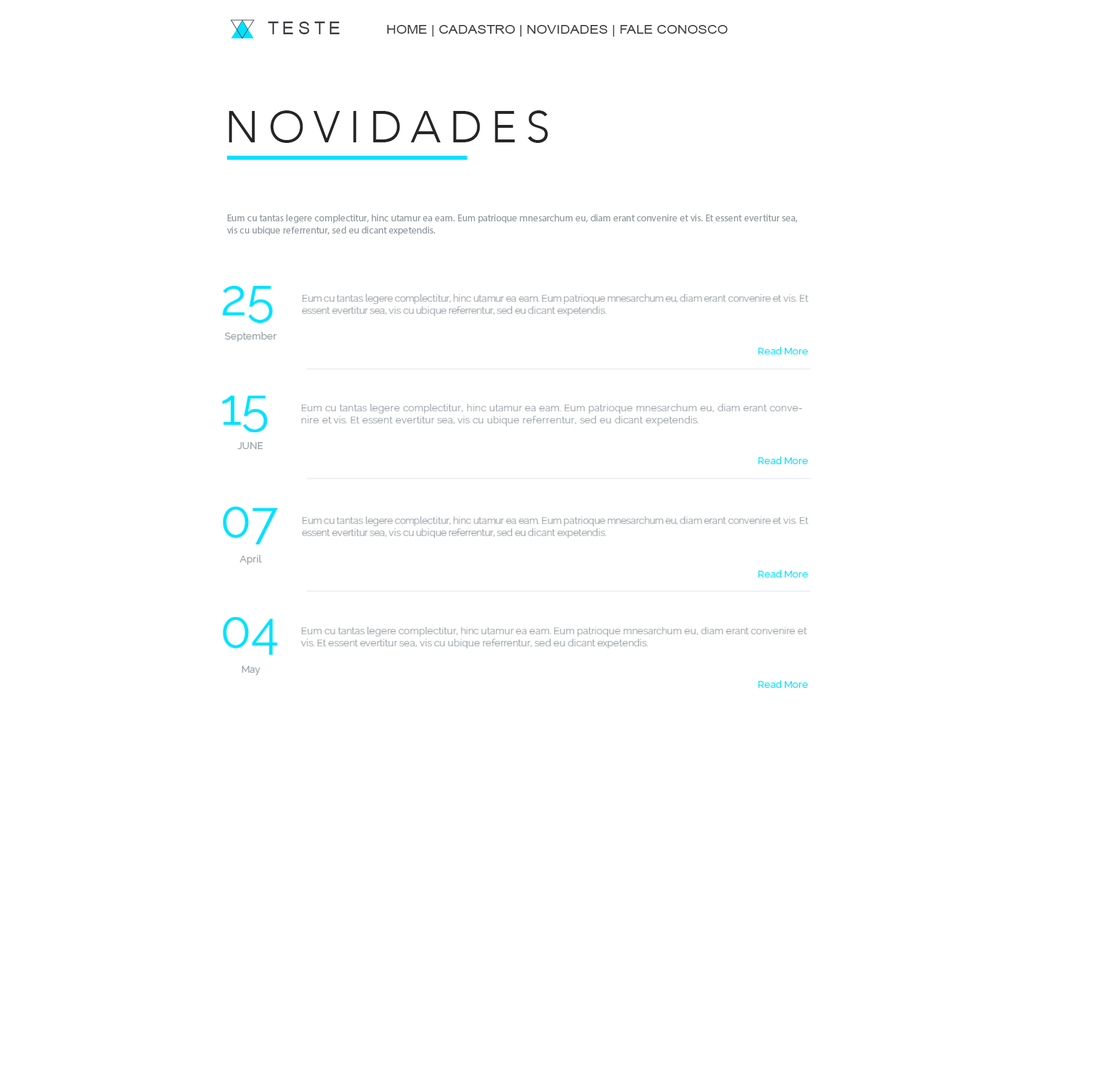
<style>
.page{position:relative;width:1115px;height:1069px;background:#ffffff}
.page>*{position:absolute;margin:0}
.t1{font:18.2px "ArialMT";letter-spacing:0.2em;color:#3f4244}
.t2{font:12.4px "ArialMT";color:#3f4244;scale:1.11 1}
.t3{font:44.1px "Avenir-Light";letter-spacing:0.2em;color:#252726}
.t4{font:9.8px "MyriadPro-Regular";color:#929ba0}
.t5{font:50.3px "Raleway";color:#00e1ff}
.t6{font:9.8px "Raleway-Light";color:#929ba0;scale:0.97 1}
.t7{font:9.8px "Raleway";color:#929ba0}
.t8{font:9.8px "Raleway";color:#00e1ff}
.t9{font:9.8px "Raleway-Light";color:#929ba0;scale:1.04 1}
.t10{font:9.8px "Raleway-Light";color:#929ba0}
</style>
<div class="page">
<p class="t1" style="left:268px;top:21px;width:72px;height:13px">TESTE</p>
<p class="t2" style="left:387px;top:25px;width:341px;height:12px">HOME | CADASTRO | NOVIDADES | FALE CONOSCO</p>
<p class="t3" style="left:229px;top:110px;width:319px;height:33px">NOVIDADES</p>
<p class="t4" style="left:227px;top:214px;width:571px;height:21px">Eum cu tantas legere complectitur, hinc utamur ea eam. Eum patrioque mnesarchum eu, diam erant convenire et vis. Et essent evertitur sea, vis cu ubique referrentur, sed eu dicant expetendis.</p>
<p class="t5" style="left:223px;top:286px;width:50px;height:37px">25</p>
<p class="t6" style="left:302px;top:294px;width:507px;height:22px">Eum cu tantas legere complectitur, hinc utamur ea eam. Eum patrioque mnesarchum eu, diam erant convenire et vis. Et essent evertitur sea, vis cu ubique referrentur, sed eu dicant expetendis.</p>
<p class="t7" style="left:225px;top:332px;width:52px;height:10px">September</p>
<p class="t8" style="left:759px;top:347px;width:50px;height:7px">Read More</p>
<p class="t5" style="left:223px;top:396px;width:45px;height:36px">15</p>
<p class="t9" style="left:301px;top:404px;width:501px;height:22px">Eum cu tantas legere complectitur, hinc utamur ea eam. Eum patrioque mnesarchum eu, diam erant convenire et vis. Et essent evertitur sea, vis cu ubique referrentur, sed eu dicant expetendis.</p>
<p class="t7" style="left:238px;top:442px;width:25px;height:7px">JUNE</p>
<p class="t8" style="left:759px;top:457px;width:50px;height:7px">Read More</p>
<p class="t5" style="left:223px;top:507px;width:55px;height:37px">07</p>
<p class="t6" style="left:302px;top:516px;width:507px;height:22px">Eum cu tantas legere complectitur, hinc utamur ea eam. Eum patrioque mnesarchum eu, diam erant convenire et vis. Et essent evertitur sea, vis cu ubique referrentur, sed eu dicant expetendis.</p>
<p class="t7" style="left:240px;top:555px;width:22px;height:10px">April</p>
<p class="t8" style="left:759px;top:570px;width:50px;height:7px">Read More</p>
<p class="t5" style="left:223px;top:617px;width:55px;height:38px">04</p>
<p class="t10" style="left:301px;top:627px;width:507px;height:21px">Eum cu tantas legere complectitur, hinc utamur ea eam. Eum patrioque mnesarchum eu, diam erant convenire et vis. Et essent evertitur sea, vis cu ubique referrentur, sed eu dicant expetendis.</p>
<p class="t7" style="left:242px;top:666px;width:18px;height:9px">May</p>
<p class="t8" style="left:759px;top:680px;width:50px;height:8px">Read More</p>
</div>
